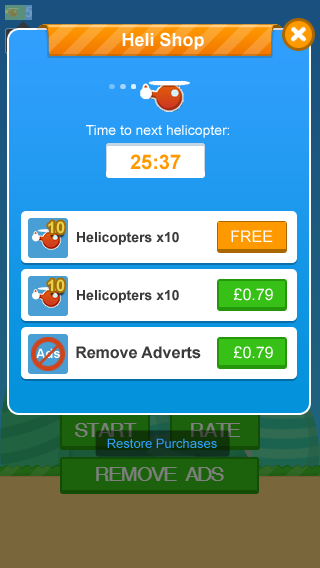
<style>
.page{position:relative;width:320px;height:568px}
.page>*{position:absolute;margin:0}
.t1{font:18px "Arial-BoldMT";color:#ffffff}
.t2{font:14px "ArialMT";color:#ffffff}
.t3{font:20px "Arial-BoldMT";color:#ff9900}
.t4{font:16px "Arial-BoldMT";color:#e5d251}
.t5{font:14px "Arial-BoldMT";color:#3a3a3a}
.t6{font:16px "ArialMT";color:#ffffff}
.t7{font:13px "Arial-BoldMT";color:#ffffff}
.t8{font:16px "Arial-BoldMT";color:#3a3a3a}
.t9{font:13px "ArialMT";color:#319ffd}
</style>
<div class="page">
<p class="t1" style="left:122px;top:32px;width:82px;height:18px">Heli Shop</p>
<p class="t2" style="left:86px;top:125px;width:143px;height:13px">Time to next helicopter:</p>
<p class="t3" style="left:130px;top:154px;width:51px;height:16px">25:37</p>
<p class="t4" style="left:48px;top:221px;width:17px;height:13px">10</p>
<p class="t5" style="left:77px;top:232px;width:102px;height:13px">Helicopters x10</p>
<p class="t6" style="left:231px;top:230px;width:42px;height:12px">FREE</p>
<p class="t4" style="left:48px;top:279px;width:17px;height:13px">10</p>
<p class="t5" style="left:77px;top:290px;width:102px;height:13px">Helicopters x10</p>
<p class="t6" style="left:233px;top:288px;width:40px;height:13px">£0.79</p>
<p class="t7" style="left:36px;top:348px;width:24px;height:10px">Ads</p>
<p class="t8" style="left:76px;top:346px;width:125px;height:13px">Remove Adverts</p>
<p class="t6" style="left:233px;top:346px;width:40px;height:13px">£0.79</p>
<p class="t9" style="left:107px;top:438px;width:110px;height:10px">Restore Purchases</p>
</div>
